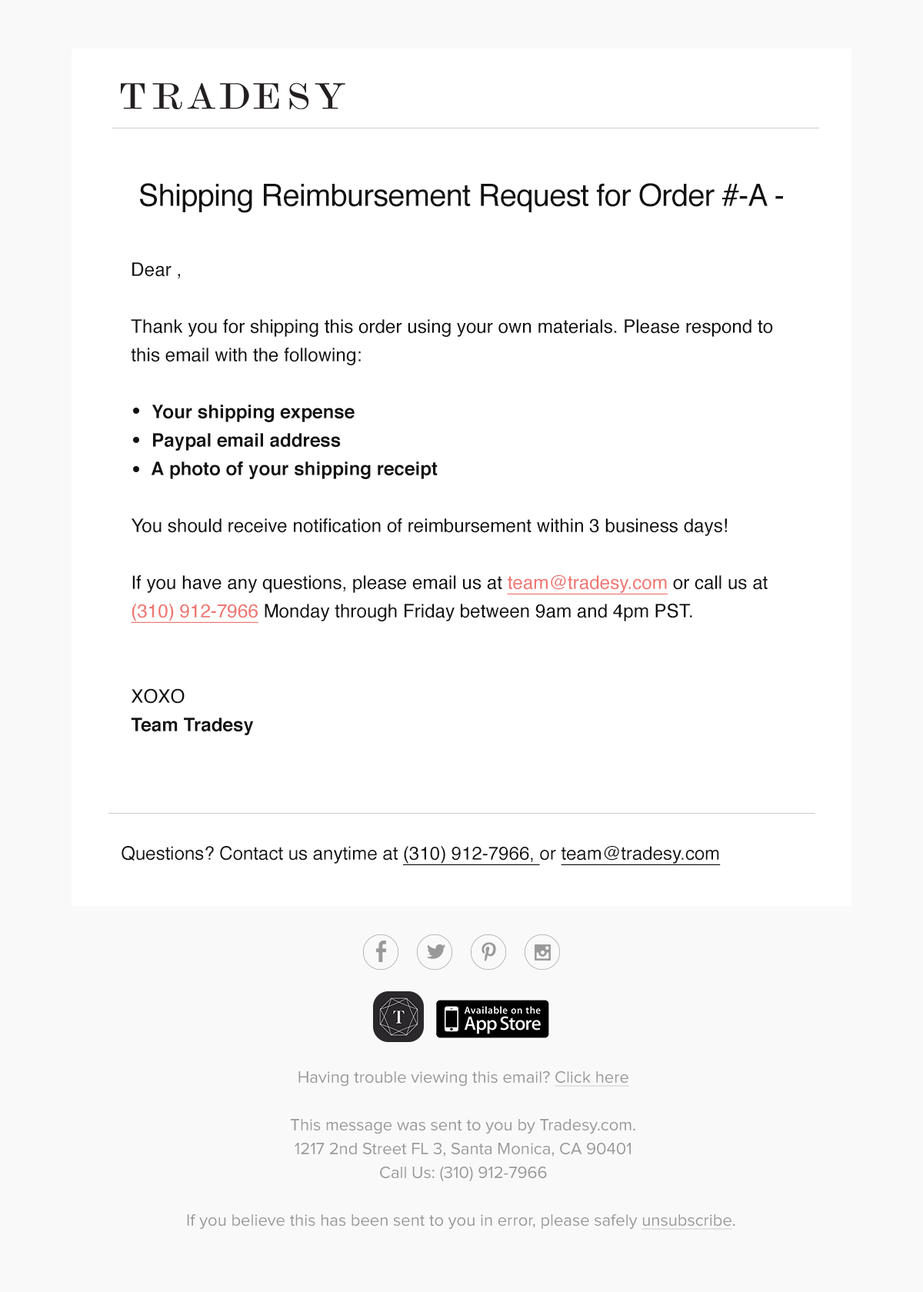
<style>
.page{position:relative;width:923px;height:1292px;background:#ffffff}
.page>*{position:absolute;margin:0}
.t1{font:30.8px "Helvetica";letter-spacing:-0.02em;color:#111111}
.t2{font:18.6px/28.5px "Helvetica";color:#111111}
.t3{font:18.6px/28.5px "Helvetica-Bold";color:#111111}
.t4{font:18.6px/28.5px "Helvetica";color:#ee7873;text-decoration:underline}
.t5{font:18.5px "Helvetica";color:#111111}
.t6{font:18.5px "Helvetica";color:#111111;text-decoration:underline}
.t7{font:16.9px/23.8px "ProximaNova-Regular";color:#999999}
.t8{font:16.9px/23.8px "ProximaNova-Regular";color:#999999;text-decoration:underline}
</style>
<div class="page">
<p class="t1" style="left:140px;top:183px;width:643px;height:30px">Shipping Reimbursement Request for Order #-A -</p>
<p class="t2" style="left:131px;top:262px;width:642px;height:473px">Dear ,<br><br>Thank you for shipping this order using your own materials. Please respond to this email with the following:<br><br><span class="t3">    Your shipping expense<br>    Paypal email address<br>    A photo of your shipping receipt<br></span><br>You should receive notification of reimbursement within 3 business days!<br><br>If you have any questions, please email us at <span class="t4">team@tradesy.com</span> or call us at <span class="t4">(310) 912-7966</span> Monday through Friday between 9am and 4pm PST.<br><br><br>XOXO<br><span class="t3">Team Tradesy</span></p>
<p class="t5" style="left:122px;top:846px;width:599px;height:19px">Questions? Contact us anytime at <span class="t6">(310) 912-7966, </span>or <span class="t6">team@tradesy.com</span></p>
<p class="t7" style="left:187px;top:1071px;width:548px;height:159px;text-align:center">Having trouble viewing this email? <span class="t8">Click here<br></span><br>This message was sent to you by Tradesy.com.<br>1217 2nd Street FL 3, Santa Monica, CA 90401<br>Call Us: (310) 912-7966<br><br>If you believe this has been sent to you in error, please safely <span class="t8">unsubscribe</span>.</p>
</div>
